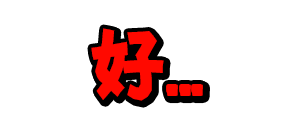
<style>
.page{position:relative;width:298px;height:133px;background:#ffffff}
.page>*{position:absolute;margin:0}
.t1{font:86.9px "HouseofTerror";letter-spacing:-0.04em;color:#ff0900;text-transform:uppercase}
.t2{font:86.9px "NishikitekiBold-Regular";letter-spacing:-0.04em;color:#ff0900;text-transform:uppercase}
</style>
<div class="page">
<p class="t1" style="left:91px;top:28px;width:112px;height:73px"><span class="t2">好</span>...</p>
</div>
